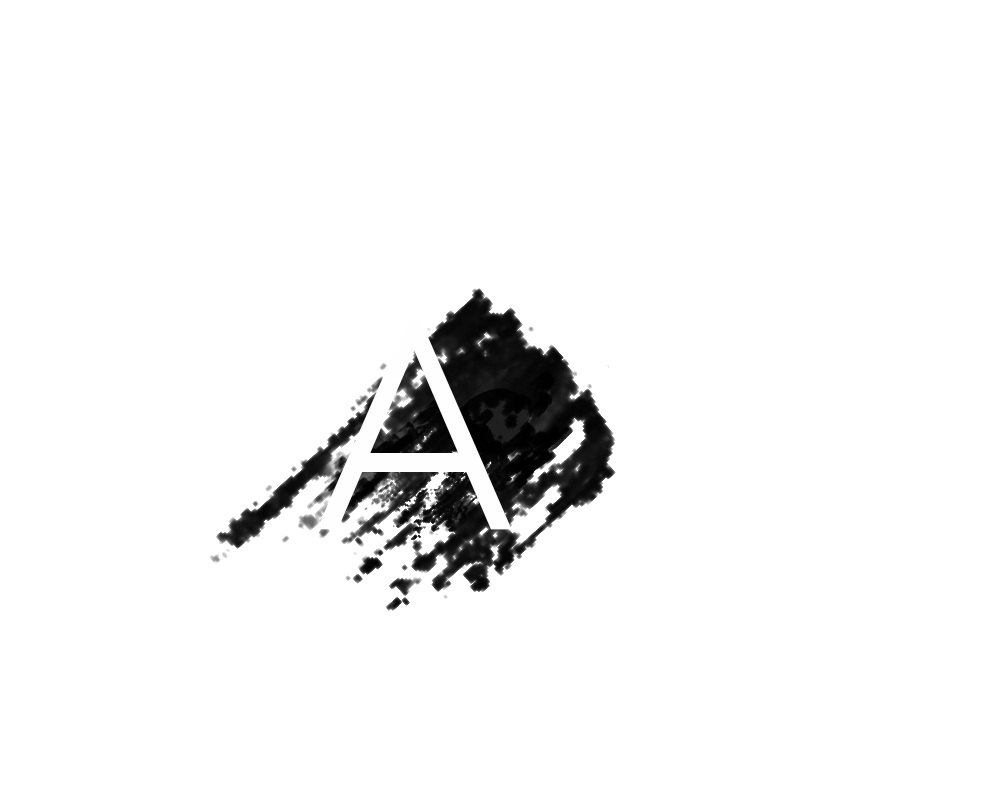
<style>
.page{position:relative;width:1000px;height:800px;background:#ffffff}
.page>*{position:absolute;margin:0}
.t1{font:300px "TomaSans-Regular";color:#fefefe}
</style>
<div class="page">
<p class="t1" style="left:317px;top:320px;width:195px;height:210px">A</p>
</div>
